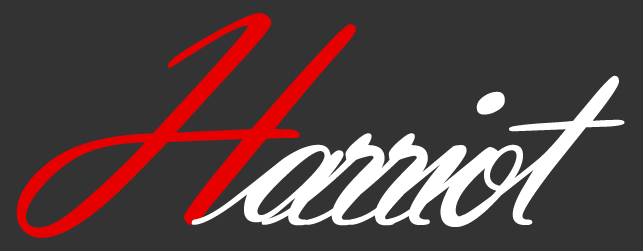
<style>
.page{position:relative;width:643px;height:251px;background:#333333}
.page>*{position:absolute;margin:0}
.t1{font:300px "VladimirScript";letter-spacing:-0.14em;color:#ffffff}
.t2{font:300px "VladimirScript";letter-spacing:-0.14em;color:#e60000}
</style>
<div class="page">
<p class="t1" style="left:16px;top:13px;width:609px;height:225px"><span class="t2">H</span>arriot</p>
</div>
